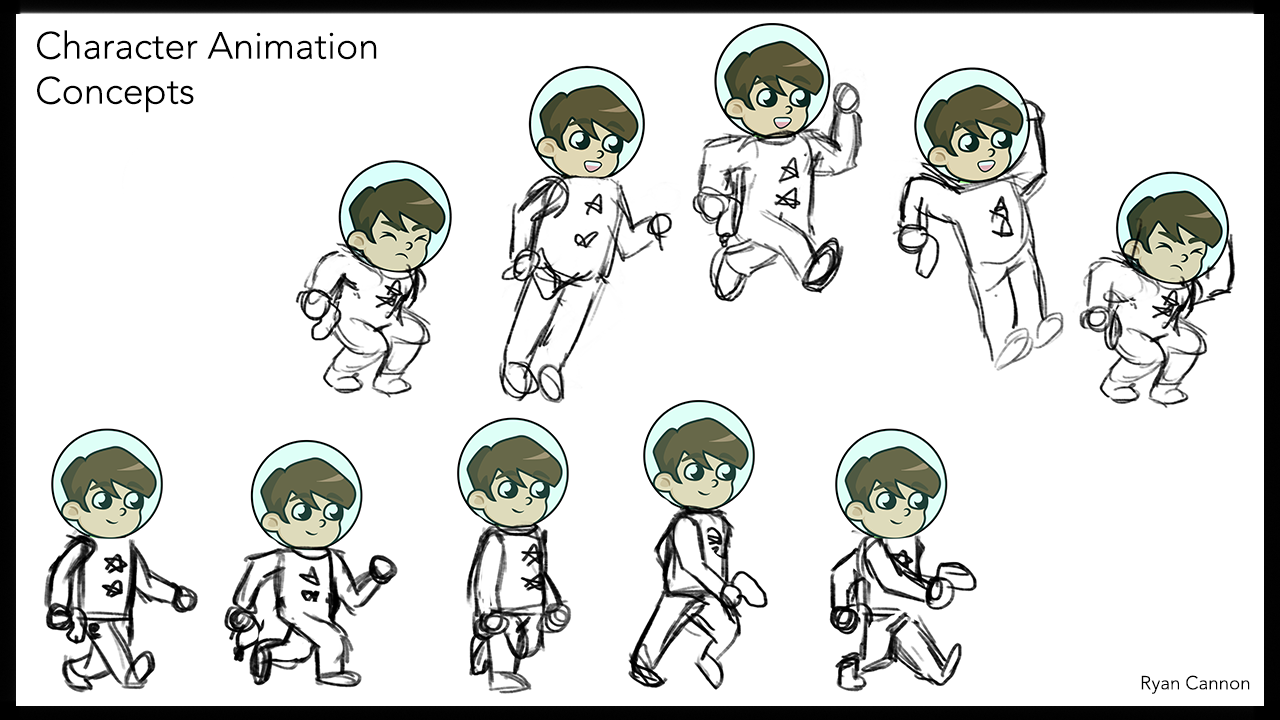
<style>
.page{position:relative;width:1280px;height:720px;background:#ffffff}
.page>*{position:absolute;margin:0}
.t1{font:37.5px "Avenir-Light";color:#000000}
.t2{font:18.8px "Avenir-Light";color:#000000}
</style>
<div class="page">
<p class="t1" style="left:37px;top:30px;width:340px;height:83px">Character Animation<br>Concepts</p>
<p class="t2" style="left:1141px;top:675px;width:109px;height:19px">Ryan Cannon</p>
</div>
